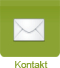
<style>
.page{position:relative;width:60px;height:68px;background:#8aa333}
.page>*{position:absolute;margin:0}
.t1{font:9.6px "ArialMT";color:#89a231}
</style>
<div class="page">
<p class="t1" style="left:15px;top:61px;width:33px;height:7px">Kontakt</p>
</div>
